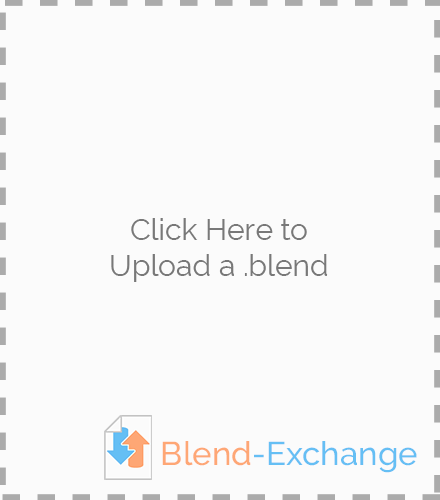
<style>
.page{position:relative;width:440px;height:500px;background:#fbfbfb}
.page>*{position:absolute;margin:0}
.t1{font:30px "Raleway";color:#787878}
.t2{font:32.9px "Raleway-Medium"}
</style>
<div class="page">
<p class="t1" style="left:111px;top:218px;width:217px;height:64px;text-align:center">Click Here to<br>Upload a .blend</p>
<p class="t2" style="left:162px;top:441px;width:255px;height:32px">Blend-Exchange</p>
</div>
